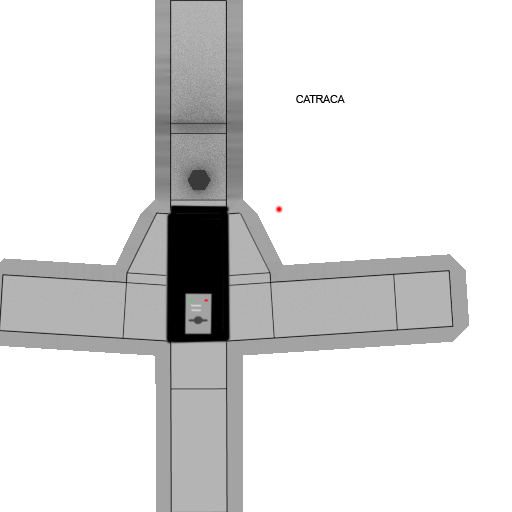
<style>
.page{position:relative;width:512px;height:512px;background:#ffffff}
.page>*{position:absolute;margin:0}
.t1{font:11px "ArialMT";letter-spacing:-0.04em;color:#000000}
</style>
<div class="page">
<p class="t1" style="left:296px;top:95px;width:49px;height:8px">CATRACA</p>
</div>
